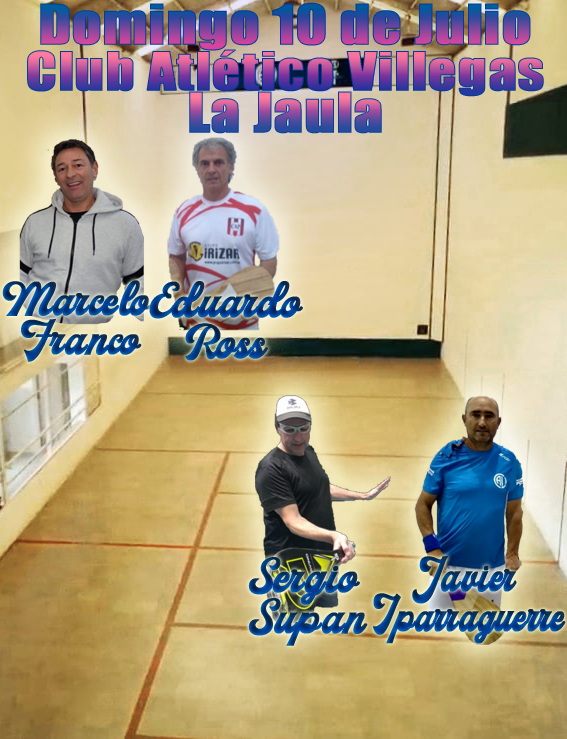
<style>
.page{position:relative;width:567px;height:739px}
.page>*{position:absolute;margin:0}
.t1{font:51.2px "Impact";font-weight:bold;scale:1.13 1}
.t2{font:49.4px "Impact";font-weight:bold;scale:1.13 1}
.t3{font:46.5px/39.9px "MilestoneFreeVersion-Script";font-weight:bold}
.t4{font:48.1px/41.3px "MilestoneFreeVersion-Script";font-weight:bold}
.t5{font:46.5px/39.9px "MilestoneFreeVersion-Script";font-weight:bold;scale:0.87 1}
</style>
<div class="page">
<p class="t1" style="left:40px;top:2px;width:491px;height:49px">Domingo 10 de Julio</p>
<p class="t2" style="left:27px;top:49px;width:517px;height:48px">Club Atlético Villegas</p>
<p class="t1" style="left:189px;top:91px;width:193px;height:43px">La Jaula</p>
<p class="t3" style="left:2px;top:280px;width:150px;height:82px;text-align:center">Marcelo <br>Franco</p>
<p class="t4" style="left:149px;top:281px;width:154px;height:80px;text-align:center">Eduardo<br>Ross</p>
<p class="t4" style="left:248px;top:557px;width:120px;height:89px;text-align:center">Sergio <br>Supan</p>
<p class="t5" style="left:373px;top:556px;width:193px;height:88px;text-align:center">Javier <br>Iparraguerre</p>
</div>
